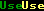
<style>
.page{position:relative;width:44px;height:11px;background:#000000}
.page>*{position:absolute;margin:0}
.t1{font:13.2px "Onesize";color:#009900;scale:0.91 1}
.t2{font:13.2px "Onesize";color:#ffff66;scale:0.91 1}
</style>
<div class="page">
<p class="t1" style="left:0px;top:1px;width:22px;height:8px">Use</p>
<p class="t2" style="left:22px;top:1px;width:22px;height:8px">Use</p>
</div>
